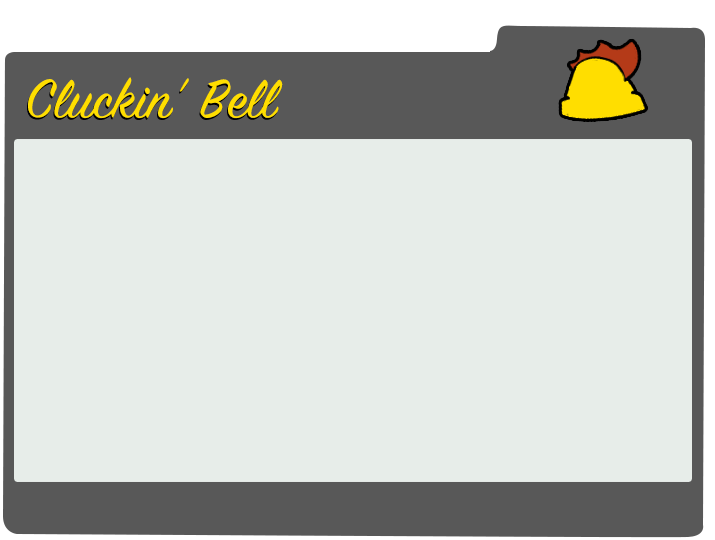
<style>
.page{position:relative;width:715px;height:540px;background:#e7ede9}
.page>*{position:absolute;margin:0}
.t1{font:60px "SignPainter-HouseScript";letter-spacing:0.01em;color:#ffde00}
</style>
<div class="page">
<p class="t1" style="left:28px;top:77px;width:255px;height:41px">Cluckin’ Bell</p>
</div>
